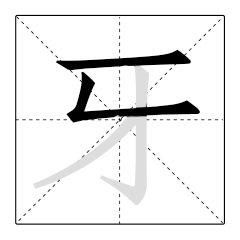
<style>
.page{position:relative;width:240px;height:240px;background:#ffffff}
.page>*{position:absolute;margin:0}
.t1{font:180px "ZhuqueFangsong-Regular";scale:1.09 1}
</style>
<div class="page">
<p class="t1" style="left:32px;top:49px;width:168px;height:157px">牙</p>
</div>
